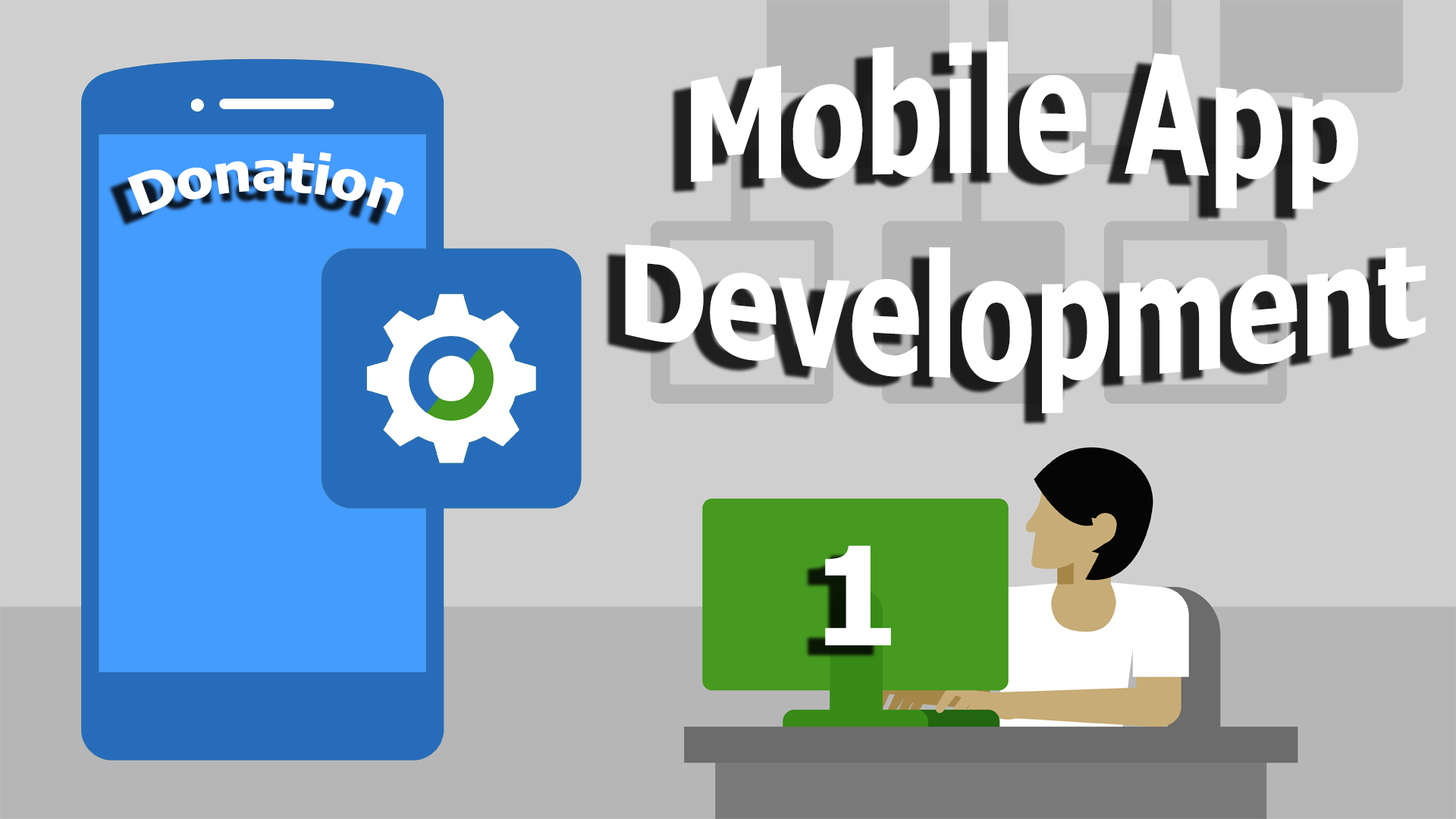
<style>
.page{position:relative;width:1456px;height:819px;background:#cfcfcf}
.page>*{position:absolute;margin:0}
.t1{font:121.3px "Tahoma-Bold";color:#ffffff}
.t2{font:54.6px "Tahoma-Bold";color:#ffffff}
.t3{font:136.5px "Tahoma-Bold";color:#ffffff}
</style>
<div class="page">
<p class="t1" style="left:625px;top:41px;width:801px;height:372px;text-align:center">Mobile App<br>Development</p>
<p class="t2" style="left:127px;top:152px;width:276px;height:63px">Donation</p>
<p class="t3" style="left:825px;top:545px;width:66px;height:100px">1</p>
</div>
